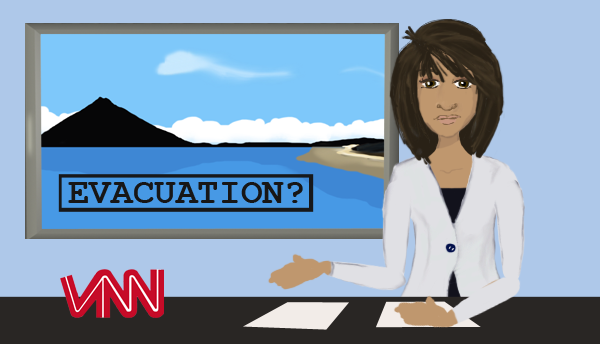
<style>
.page{position:relative;width:600px;height:344px;background:#aec8e9}
.page>*{position:absolute;margin:0}
.t1{font:36px "CourierNewPS-BoldMT";color:#171616}
</style>
<div class="page">
<p class="t1" style="left:68px;top:182px;width:235px;height:21px">EVACUATION?</p>
</div>
